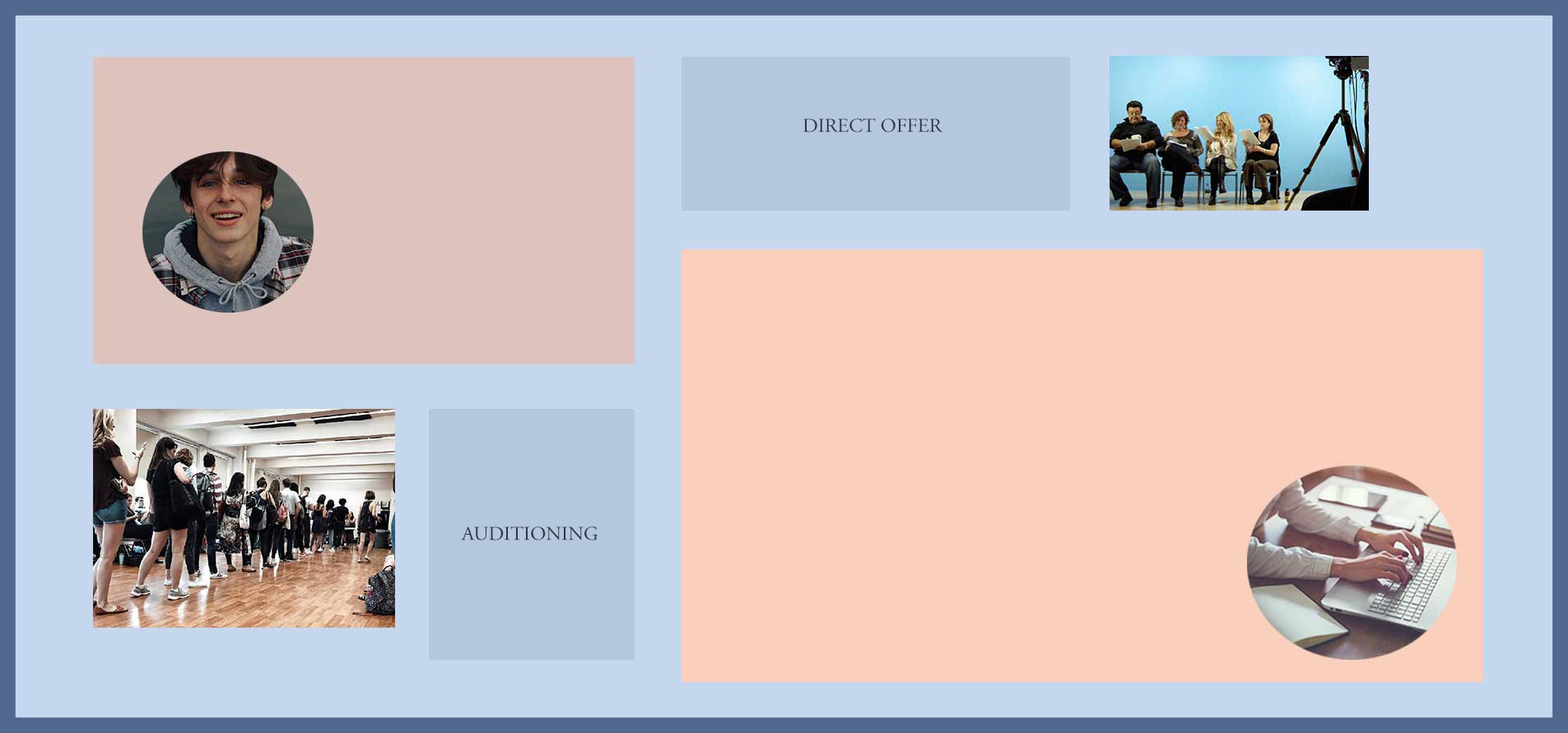
<style>
.page{position:relative;width:1568px;height:733px;background:#facfbc}
.page>*{position:absolute;margin:0}
.t1{font:19.8px "AGaramondPro-Regular";color:#2d3845}
</style>
<div class="page">
<p class="t1" style="left:803px;top:118px;width:140px;height:15px">DIRECT OFFER</p>
<p class="t1" style="left:461px;top:526px;width:137px;height:15px">AUDITIONING</p>
</div>
